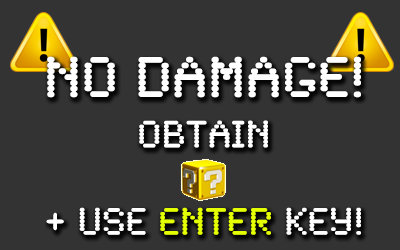
<style>
.page{position:relative;width:400px;height:250px;background:#333333}
.page>*{position:absolute;margin:0}
.t1{font:40px/4.6px "SynchroLET";color:#ffffff}
.t2{font:60px/4.6px "SynchroLET";color:#ffffff}
.t3{font:40px/4.6px "SynchroLET";color:#e4ff00}
</style>
<div class="page">
<p class="t1" style="left:46px;top:56px;width:315px;height:179px;text-align:center"><span class="t2">NO DAMAGE!<br><br><br><br><br><br><br><br><br><br><br></span>OBTAIN<br><br><br><br><br><br><br><br><br><br><br><br><br><br><br><br><br><br><br>+ USE <span class="t3">ENTER</span> KEY!</p>
</div>
